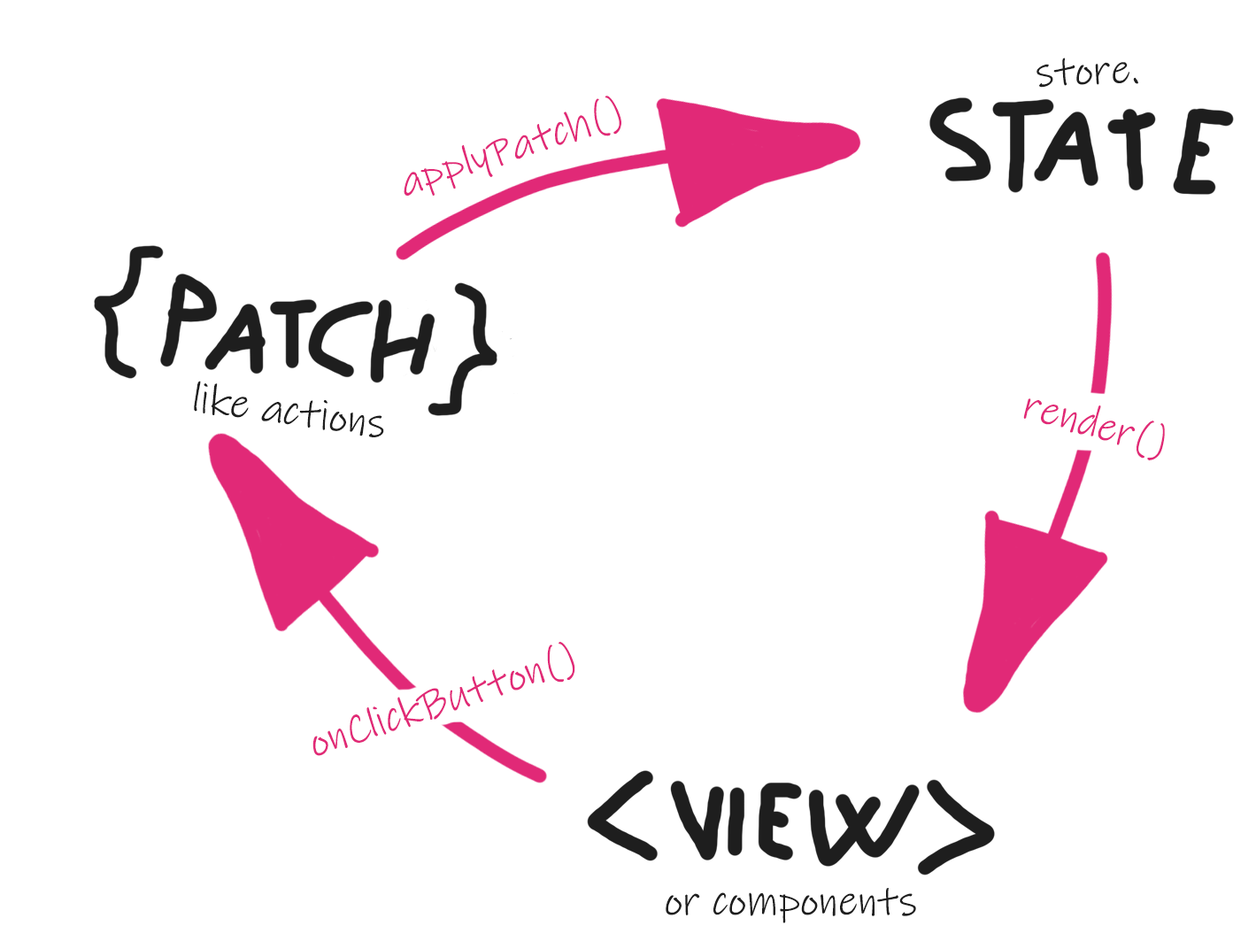
<style>
.page{position:relative;width:1256px;height:949px;background:#ffffff}
.page>*{position:absolute;margin:0}
.t1{font:42.5px "InkFree";color:#1e1e1e}
.t2{font:42.5px "InkFree";color:#e12977}
</style>
<div class="page">
<p class="t1" style="left:1037px;top:58px;width:102px;height:30px;rotate:-2deg">store.</p>
<p class="t2" style="left:404px;top:96px;width:218px;height:100px;rotate:-18deg">applyPatch()</p>
<p class="t1" style="left:194px;top:381px;width:190px;height:56px;rotate:8deg">like actions</p>
<p class="t2" style="left:1023px;top:398px;width:142px;height:62px;rotate:16deg">render()</p>
<p class="t2" style="left:313px;top:642px;width:262px;height:114px;rotate:-18deg">onClickButton()</p>
<p class="t1" style="left:666px;top:888px;width:250px;height:35px">or components</p>
</div>
